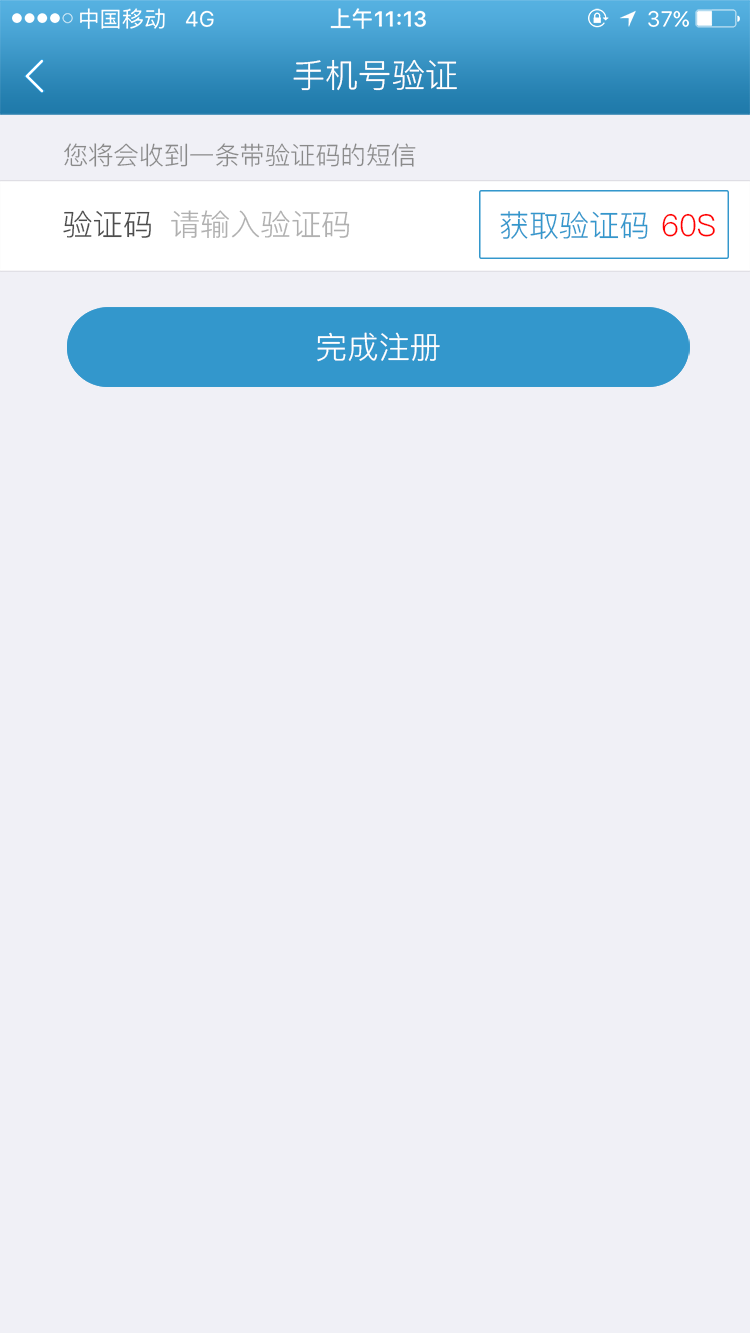
<style>
.page{position:relative;width:750px;height:1333px;background:#f0f0f6}
.page>*{position:absolute;margin:0}
.t1{font:33.3px "PingFang-SC-Regular";color:#ffffff}
.t2{font:25px "PingFang-SC-Regular";color:#8a8a8a}
.t3{font:30px "PingFang-SC-Regular";color:#4d4d4d}
.t4{font:30px "PingFang-SC-Regular";color:#b0b0b0}
.t5{font:30.2px "PingFang-SC-Regular";color:#3397cc}
.t6{font:30.2px "PingFang-SC-Regular";color:#ff0000}
.t7{font:30.9px "PingFang-SC-Regular";color:#ffffff}
</style>
<div class="page">
<p class="t1" style="left:293px;top:59px;width:164px;height:32px">手机号验证</p>
<p class="t2" style="left:64px;top:143px;width:352px;height:24px">您将会收到一条带验证码的短信</p>
<p class="t3" style="left:63px;top:210px;width:88px;height:28px">验证码</p>
<p class="t4" style="left:171px;top:210px;width:179px;height:29px">请输入验证码</p>
<p class="t5" style="left:500px;top:211px;width:148px;height:29px">获取验证码</p>
<p class="t6" style="left:662px;top:213px;width:53px;height:24px">60S</p>
<p class="t7" style="left:317px;top:332px;width:123px;height:30px">完成注册</p>
</div>
